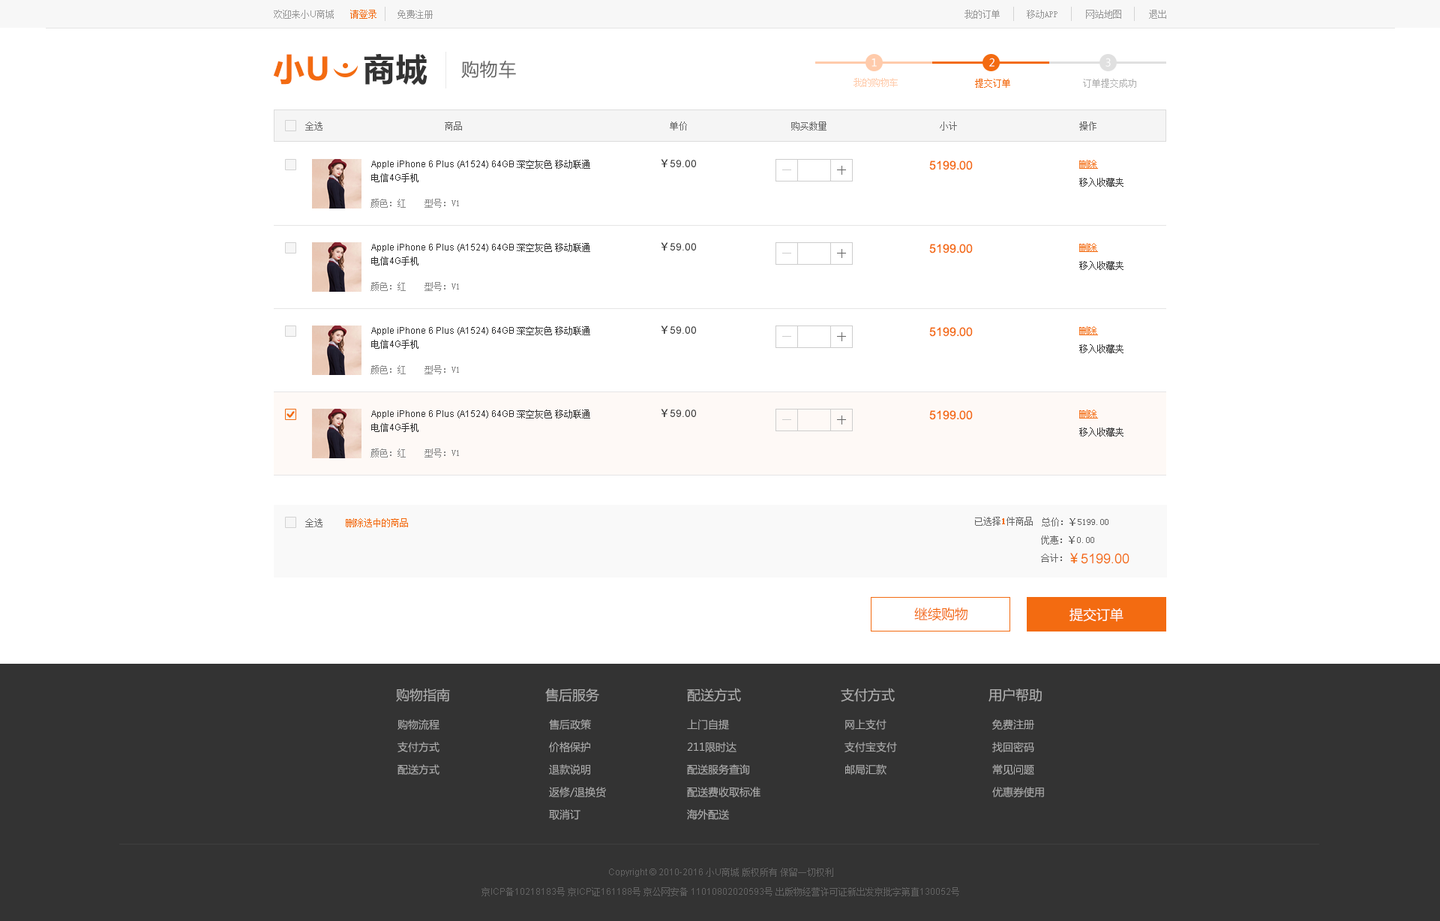
<style>
.page{position:relative;width:1440px;height:921px;background:#ffffff}
.page>*{position:absolute;margin:0}
.t1{font:9px "SimSun";color:#999999}
.t2{font:9px "ArialMT";color:#999999}
.t3{font:9px "SimSun";color:#f36b11}
.t4{font:31.5px "MicrosoftYaHei-Bold";letter-spacing:0.03em;color:#f36b11}
.t5{font:31.5px "MicrosoftYaHei-Bold";letter-spacing:0.03em;color:#333333}
.t6{font:18px "MicrosoftYaHei";letter-spacing:0.03em;color:#666666}
.t7{font:10.5px "MicrosoftYaHei";color:#ffffff}
.t8{font:9px "SimSun";color:#ffcbab}
.t9{font:9px "SimSun";color:#afafaf}
.t10{font:9px "SimSun";color:#666666}
.t11{font:9px/13.5px "ArialMT";color:#333333}
.t12{font:9px/13.5px "SimSun";color:#333333}
.t13{font:10.5px "ArialMT";color:#333333}
.t14{font:10.5px "AdobeHeitiStd-Regular";color:#333333}
.t15{font:12px "ArialMT";color:#f36b11}
.t16{font:9px/18px "SimSun";color:#333333}
.t17{font:9px/18px "SimSun";color:#f36b11;text-decoration:underline}
.t18{font:9px "SimSun";color:#888888}
.t19{font:9px "SimSun";color:#f36b11;font-weight:bold}
.t20{font:9px/18px "SimSun";color:#666666}
.t21{font:13.5px "ArialMT";color:#f36b11}
.t22{font:13.5px "MicrosoftYaHei";color:#f36b11}
.t23{font:13.5px "MicrosoftYaHei";color:#ffffff}
.t24{font:13.5px "MicrosoftYaHei";color:#afafaf}
.t25{font:10.5px/22.5px "MicrosoftYaHei";color:#afafaf}
.t26{font:9px/19.5px "ArialMT";color:#636363}
.t27{font:9px/19.5px "SimSun";color:#636363}
</style>
<div class="page">
<p class="t1" style="left:274px;top:10px;width:60px;height:9px">欢迎来小<span class="t2">U</span>商城</p>
<p class="t3" style="left:350px;top:10px;width:26px;height:9px">请登录</p>
<p class="t1" style="left:398px;top:10px;width:35px;height:9px">免费注册</p>
<p class="t1" style="left:964px;top:10px;width:36px;height:9px">我的订单</p>
<p class="t1" style="left:1027px;top:10px;width:31px;height:9px">移动APP</p>
<p class="t1" style="left:1086px;top:10px;width:35px;height:9px">网站地图</p>
<p class="t1" style="left:1149px;top:10px;width:17px;height:9px">退出</p>
<p class="t4" style="left:273px;top:54px;width:155px;height:32px">小U   <span class="t5">商城</span></p>
<p class="t6" style="left:461px;top:60px;width:55px;height:19px">购物车</p>
<p class="t7" style="left:872px;top:58px;width:5px;height:9px">1</p>
<p class="t7" style="left:989px;top:58px;width:5px;height:9px">2</p>
<p class="t7" style="left:1106px;top:58px;width:5px;height:9px">3</p>
<p class="t8" style="left:854px;top:78px;width:44px;height:9px">我的购物车</p>
<p class="t3" style="left:975px;top:79px;width:35px;height:9px">提交订单</p>
<p class="t9" style="left:1083px;top:79px;width:53px;height:9px">订单提交成功</p>
<p class="t10" style="left:305px;top:122px;width:791px;height:8px">全选                           商品                                              单价                       购买数量                         小计                           操作</p>
<p class="t11" style="left:371px;top:160px;width:219px;height:22px">Apple iPhone 6 Plus (A1524) 64GB <span class="t12">深空灰色 移动联通<br>电信</span>4G<span class="t12">手机</span></p>
<p class="t13" style="left:661px;top:159px;width:35px;height:8px"><span class="t14">￥</span>59.00</p>
<p class="t15" style="left:929px;top:160px;width:44px;height:10px">5199.00</p>
<p class="t16" style="left:1079px;top:160px;width:45px;height:27px"><span class="t17">删除<br></span>移入收藏夹</p>
<p class="t18" style="left:370px;top:199px;width:89px;height:9px">颜色：红    型号：V1</p>
<p class="t11" style="left:371px;top:243px;width:219px;height:23px">Apple iPhone 6 Plus (A1524) 64GB <span class="t12">深空灰色 移动联通<br>电信</span>4G<span class="t12">手机</span></p>
<p class="t13" style="left:661px;top:242px;width:35px;height:8px"><span class="t14">￥</span>59.00</p>
<p class="t15" style="left:929px;top:244px;width:44px;height:10px">5199.00</p>
<p class="t16" style="left:1079px;top:243px;width:45px;height:27px"><span class="t17">删除<br></span>移入收藏夹</p>
<p class="t18" style="left:370px;top:282px;width:89px;height:9px">颜色：红    型号：V1</p>
<p class="t11" style="left:371px;top:326px;width:219px;height:23px">Apple iPhone 6 Plus (A1524) 64GB <span class="t12">深空灰色 移动联通<br>电信</span>4G<span class="t12">手机</span></p>
<p class="t13" style="left:661px;top:326px;width:35px;height:8px"><span class="t14">￥</span>59.00</p>
<p class="t15" style="left:929px;top:327px;width:44px;height:10px">5199.00</p>
<p class="t16" style="left:1079px;top:326px;width:45px;height:27px"><span class="t17">删除<br></span>移入收藏夹</p>
<p class="t18" style="left:370px;top:365px;width:89px;height:9px">颜色：红    型号：V1</p>
<p class="t11" style="left:371px;top:410px;width:219px;height:22px">Apple iPhone 6 Plus (A1524) 64GB <span class="t12">深空灰色 移动联通<br>电信</span>4G<span class="t12">手机</span></p>
<p class="t13" style="left:661px;top:409px;width:35px;height:8px"><span class="t14">￥</span>59.00</p>
<p class="t15" style="left:929px;top:410px;width:44px;height:10px">5199.00</p>
<p class="t16" style="left:1079px;top:410px;width:45px;height:26px"><span class="t17">删除<br></span>移入收藏夹</p>
<p class="t18" style="left:370px;top:448px;width:89px;height:10px">颜色：红    型号：V1</p>
<p class="t3" style="left:305px;top:518px;width:103px;height:9px"><span class="t10">全选     </span>删除选中的商品</p>
<p class="t10" style="left:975px;top:517px;width:58px;height:9px">已选择<span class="t19">1</span>件商品</p>
<p class="t10" style="left:1042px;top:518px;width:66px;height:8px">总价：￥5199.00</p>
<p class="t20" style="left:1041px;top:536px;width:53px;height:26px">优惠：￥0.00<br>合计：</p>
<p class="t21" style="left:1070px;top:553px;width:60px;height:11px"><span class="t22">￥</span>5199.00</p>
<p class="t22" style="left:914px;top:608px;width:54px;height:13px">继续购物</p>
<p class="t23" style="left:1070px;top:608px;width:54px;height:14px">提交订单</p>
<p class="t24" style="left:396px;top:688px;width:54px;height:14px">购物指南</p>
<p class="t24" style="left:545px;top:688px;width:54px;height:14px">售后服务</p>
<p class="t24" style="left:687px;top:688px;width:54px;height:14px">配送方式</p>
<p class="t24" style="left:841px;top:688px;width:54px;height:14px">支付方式</p>
<p class="t24" style="left:988px;top:688px;width:54px;height:14px">用户帮助</p>
<p class="t25" style="left:398px;top:719px;width:42px;height:56px">购物流程<br>支付方式<br>配送方式</p>
<p class="t25" style="left:549px;top:719px;width:57px;height:101px">售后政策<br>价格保护<br>退款说明<br>返修/退换货<br>取消订</p>
<p class="t25" style="left:687px;top:719px;width:73px;height:101px">上门自提<br>211限时达<br>配送服务查询<br>配送费收取标准<br>海外配送</p>
<p class="t25" style="left:844px;top:719px;width:53px;height:56px">网上支付<br>支付宝支付<br>邮局汇款</p>
<p class="t25" style="left:992px;top:719px;width:52px;height:79px">免费注册<br>找回密码<br>常见问题<br>优惠券使用</p>
<p class="t26" style="left:482px;top:868px;width:477px;height:28px;text-align:center">Copyright © 2010-2016 <span class="t27">小</span>U<span class="t27">商城 版权所有 保留一切权利<br>京</span>ICP<span class="t27">备</span>10218183<span class="t27">号 京</span>ICP<span class="t27">证</span>161188<span class="t27">号 京公网安备</span> 11010802020593<span class="t27">号 出版物经营许可证新出发京批字第直</span>130052<span class="t27">号</span></p>
</div>
